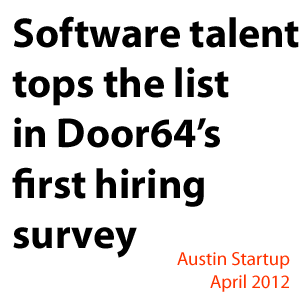
<style>
.page{position:relative;width:300px;height:300px;background:#ffffff}
.page>*{position:absolute;margin:0}
.t1{font:41.8px "MyriadPro-Bold";color:#000000}
.t2{font:18.9px "MyriadPro-Regular";color:#ff3300}
</style>
<div class="page">
<p class="t1" style="left:12px;top:16px;width:287px;height:242px">Software talent<br>tops the list <br>in Door64’s <br>first hiring <br>survey</p>
<p class="t2" style="left:177px;top:252px;width:113px;height:40px;text-align:right">Austin Startup<br>April 2012</p>
</div>
